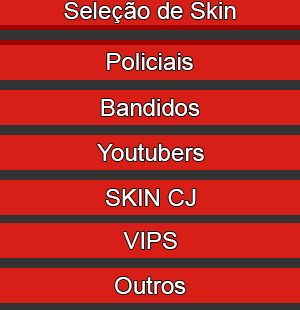
<style>
.page{position:relative;width:300px;height:310px;background:#d71f18}
.page>*{position:absolute;margin:0}
.t1{font:24px "ArialMT";color:#ffffff}
</style>
<div class="page">
<p class="t1" style="left:64px;top:2px;width:172px;height:21px">Seleção de Skin</p>
<p class="t1" style="left:107px;top:53px;width:86px;height:17px">Policiais</p>
<p class="t1" style="left:101px;top:99px;width:99px;height:17px">Bandidos</p>
<p class="t1" style="left:97px;top:143px;width:107px;height:18px">Youtubers</p>
<p class="t1" style="left:106px;top:189px;width:90px;height:17px">SKIN CJ</p>
<p class="t1" style="left:123px;top:232px;width:54px;height:17px">VIPS</p>
<p class="t1" style="left:115px;top:276px;width:71px;height:18px">Outros</p>
</div>
